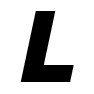
<style>
.page{position:relative;width:94px;height:94px;background:#ffffff}
.page>*{position:absolute;margin:0}
.t1{font:100px "Raleway-BlackItalic";color:#000000}
</style>
<div class="page">
<p class="t1" style="left:20px;top:11px;width:54px;height:71px">L</p>
</div>
